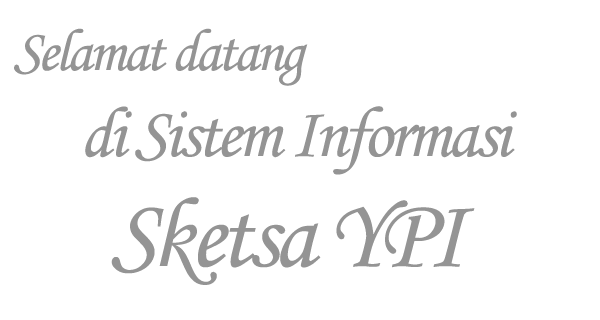
<style>
.page{position:relative;width:600px;height:320px;background:#ffffff}
.page>*{position:absolute;margin:0}
.t1{font:60px "MonotypeCorsiva";letter-spacing:-0.05em;color:#949494}
.t2{font:72px "MonotypeCorsiva";letter-spacing:-0.05em;color:#949494}
.t3{font:100px "MonotypeCorsiva";letter-spacing:-0.05em;color:#949494}
</style>
<div class="page">
<p class="t1" style="left:14px;top:28px;width:294px;height:58px">Selamat datang</p>
<p class="t2" style="left:85px;top:106px;width:432px;height:69px">di Sistem Informasi</p>
<p class="t3" style="left:111px;top:197px;width:364px;height:88px">Sketsa YPI</p>
</div>
